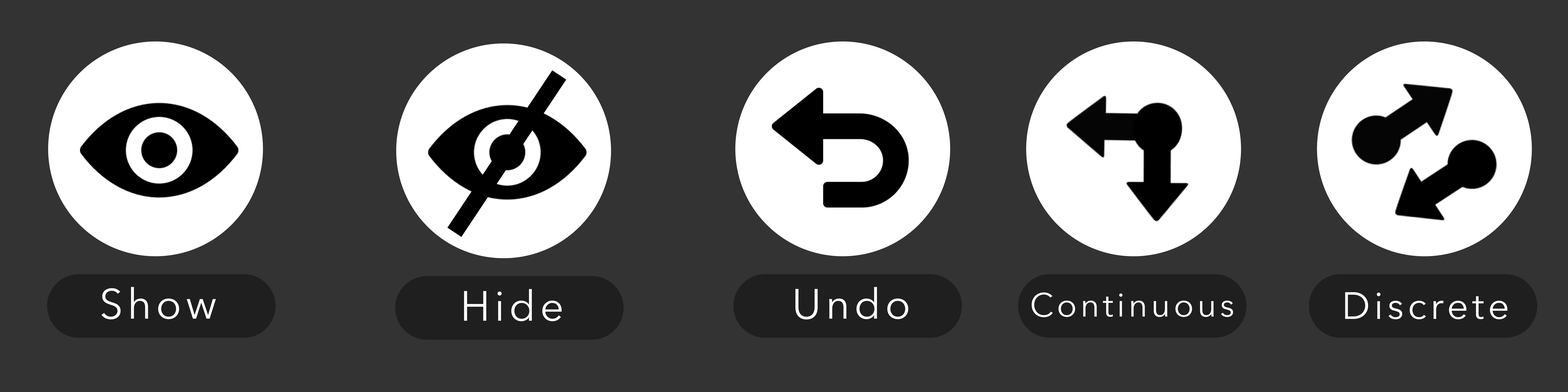
<style>
.page{position:relative;width:1568px;height:392px;background:#333333}
.page>*{position:absolute;margin:0}
.t1{font:41.9px "AvenirNext-Regular";letter-spacing:0.1em;color:#ffffff}
.t2{font:33.2px "AvenirNext-Regular";letter-spacing:0.1em;color:#ffffff}
.t3{font:37.7px "AvenirNext-Regular";letter-spacing:0.1em;color:#ffffff}
</style>
<div class="page">
<p class="t1" style="left:102px;top:287px;width:114px;height:32px">Show</p>
<p class="t1" style="left:464px;top:289px;width:98px;height:32px">Hide</p>
<p class="t1" style="left:795px;top:287px;width:113px;height:32px">Undo</p>
<p class="t2" style="left:1032px;top:292px;width:201px;height:25px">Continuous</p>
<p class="t3" style="left:1345px;top:292px;width:162px;height:27px">Discrete</p>
</div>
